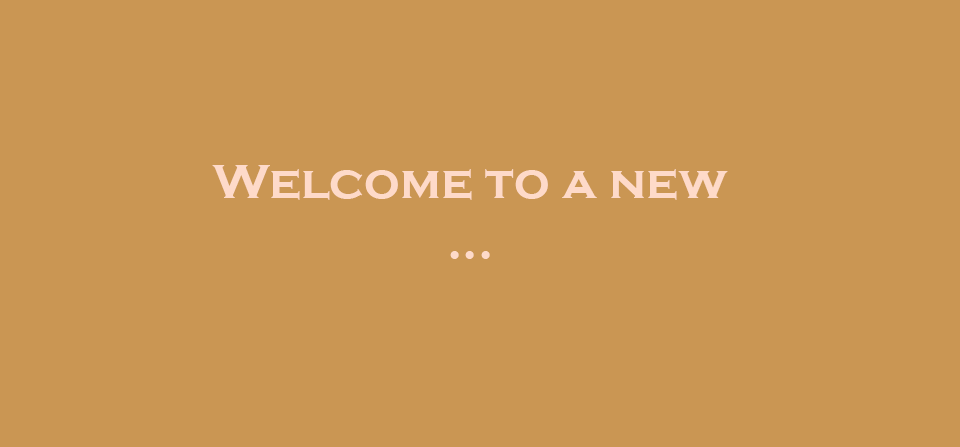
<style>
.page{position:relative;width:960px;height:447px;background:#ca9653}
.page>*{position:absolute;margin:0}
.t1{font:50px "CopperplateGothic-Bold";color:#fedac9}
</style>
<div class="page">
<p class="t1" style="left:212px;top:165px;width:516px;height:94px;text-align:center">Welcome to a new<br>...</p>
</div>
